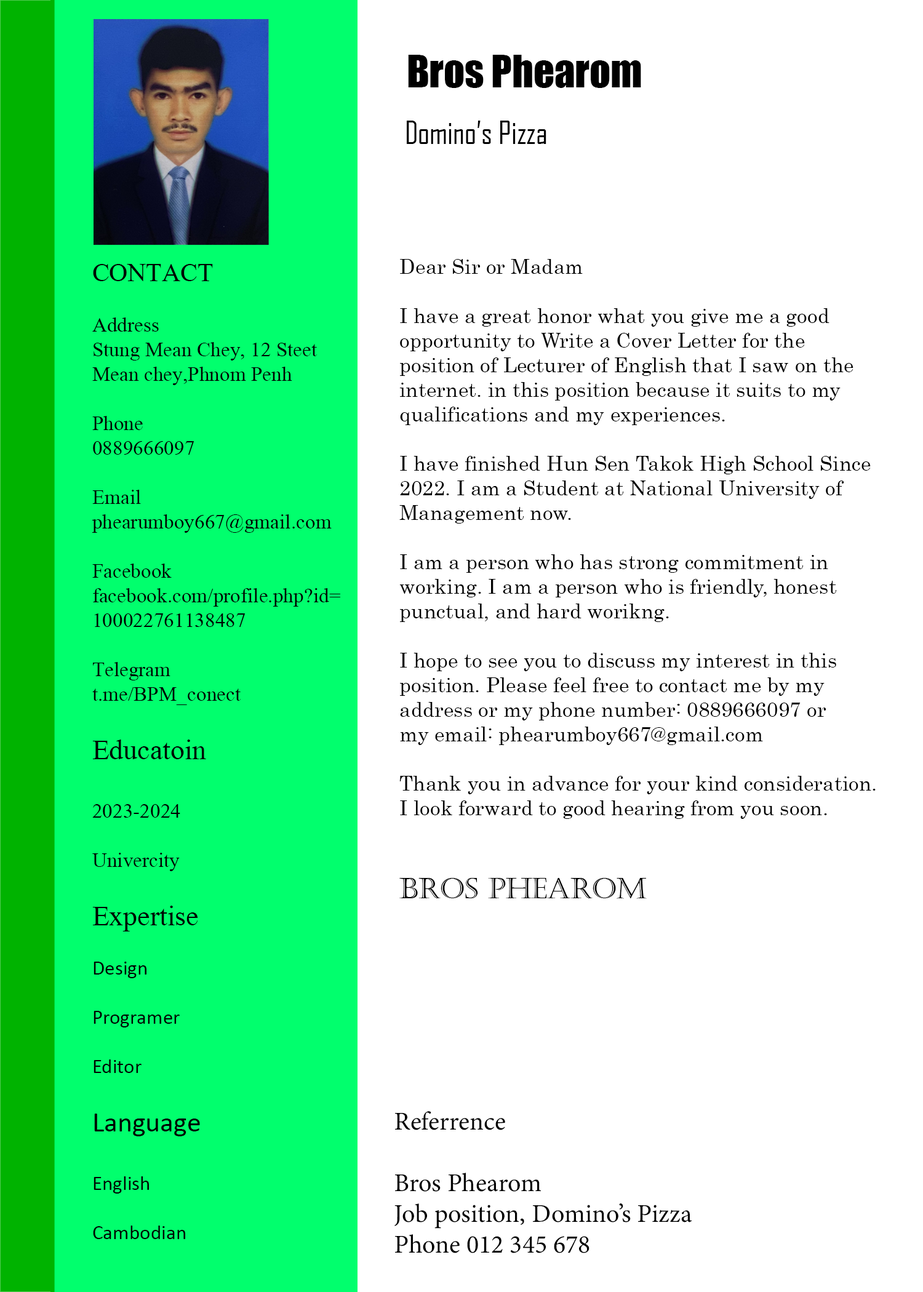
<style>
.page{position:relative;width:923px;height:1292px;background:#ffffff}
.page>*{position:absolute;margin:0}
.t1{font:41px "Impact";color:#000000}
.t2{font:30.8px "AgencyFB-Reg";color:#000000}
.t3{font:25.6px "MongolianBaiti";color:#000000}
.t4{font:20.5px "Century";color:#000000}
.t5{font:28.2px "Castellar";color:#000000}
.t6{font:20.5px "MongolianBaiti";color:#000000}
.t7{font:28.2px "MongolianBaiti";color:#000000}
.t8{font:20.5px "Calibri";color:#000000}
.t9{font:28.2px "Calibri";color:#000000}
.t10{font:25.6px "MinionVariableConcept-Roman";color:#000000}
</style>
<div class="page">
<p class="t1" style="left:408px;top:55px;width:233px;height:33px">Bros Phearom</p>
<p class="t2" style="left:407px;top:121px;width:139px;height:23px">Domino’s Pizza</p>
<p class="t3" style="left:93px;top:264px;width:120px;height:17px">CONTACT</p>
<p class="t4" style="left:399px;top:259px;width:477px;height:640px">Dear Sir or Madam<br><br>I have a great honor what you give me a good <br>opportunity to Write a Cover Letter for the <br>position of Lecturer of English that I saw on the <br>internet. in this position because it suits to my <br>qualifications and my experiences. <br><br>I have finished Hun Sen Takok High School Since<br>2022. I am a Student at National University of<br>Management now.<br><br>I am a person who has strong commitment in <br>working. I am a person who is friendly, honest<br>punctual, and hard worikng.<br><br>I hope to see you to discuss my interest in this <br>position. Please feel free to contact me by my<br>address or my phone number: 0889666097 or<br>my email: phearumboy667@gmail.com<br><br>Thank you in advance for your kind consideration.<br>I look forward to good hearing from you soon.<br><br><br><span class="t5">BROS PHEAROM</span></p>
<p class="t6" style="left:92px;top:317px;width:248px;height:922px">Address<br>Stung Mean Chey, 12 Steet<br>Mean chey,Phnom Penh<br><br>Phone<br>0889666097<br><br>Email<br>phearumboy667@gmail.com<br><br>Facebook<br>facebook.com/profile.php?id=<br>100022761138487<br><br>Telegram<br>t.me/BPM_conect<br><br><span class="t7">Educatoin<br><br></span>2023-2024<br><br>Univercity<br><br><span class="t7">Expertise<br><br></span><span class="t8">Design<br><br>Programer<br><br>Editor<br><br></span><span class="t9">Language<br><br></span><span class="t8">English<br><br>Cambodian</span></p>
<p class="t10" style="left:394px;top:1111px;width:298px;height:142px">Referrence<br><br>Bros Phearom<br>Job position, Domino’s Pizza<br>Phone 012 345 678</p>
</div>
